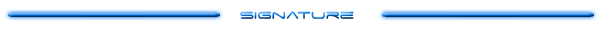
<style>
.page{position:relative;width:600px;height:30px;background:#ffffff}
.page>*{position:absolute;margin:0}
.t1{font:16px "SpaceAge"}
</style>
<div class="page">
<p class="t1" style="left:240px;top:11px;width:114px;height:8px">Signature</p>
</div>
